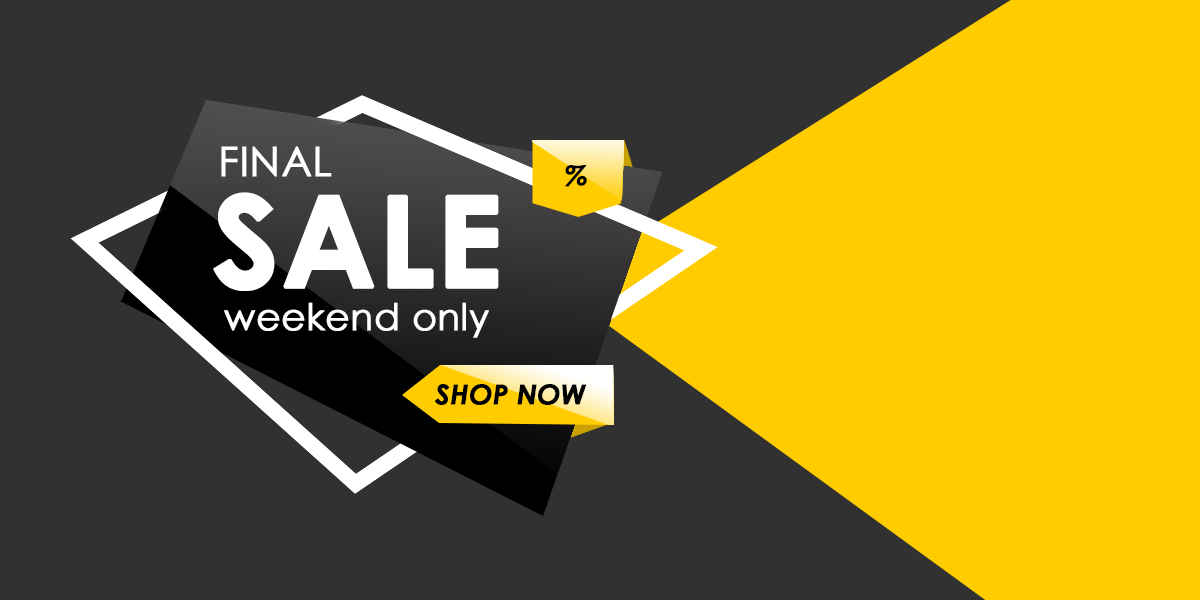
<style>
.page{position:relative;width:1200px;height:600px;background:#313131}
.page>*{position:absolute;margin:0}
.t1{font:41px "CenturyGothic";color:#ffffff;font-weight:bold}
.t2{font:27px "CenturyGothic-BoldItalic";color:#000000;font-weight:bold}
.t3{font:126px "CenturyGothic-Bold";color:#ffffff;font-weight:bold}
.t4{font:37px "CenturyGothic";color:#ffffff;font-weight:bold}
</style>
<div class="page">
<p class="t1" style="left:221px;top:146px;width:111px;height:31px">FINAL</p>
<p class="t2" style="left:565px;top:165px;width:22px;height:22px">%</p>
<p class="t3" style="left:213px;top:192px;width:286px;height:99px">SALE</p>
<p class="t4" style="left:224px;top:302px;width:265px;height:36px">weekend only</p>
<p class="t2" style="left:435px;top:384px;width:152px;height:21px">SHOP NOW</p>
</div>
